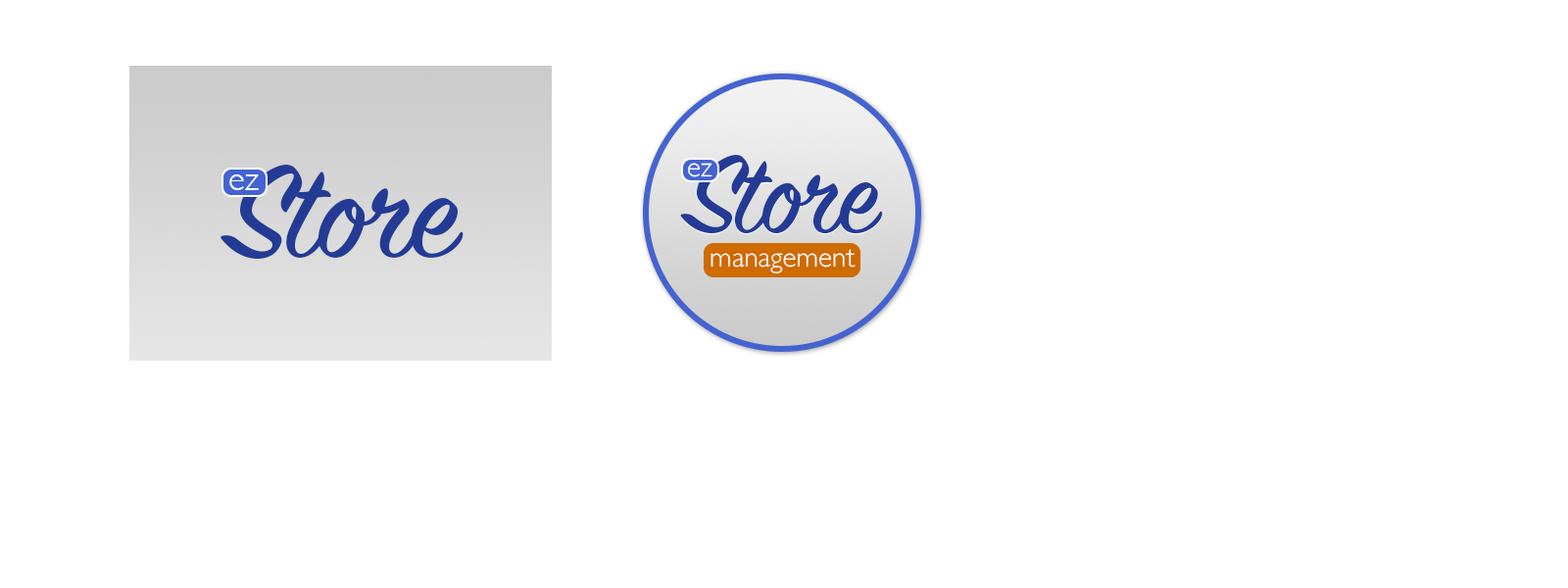
<style>
.page{position:relative;width:1568px;height:588px;background:#ffffff}
.page>*{position:absolute;margin:0}
.t1{font:122.8px "SignPainter-HouseScript";letter-spacing:-0.02em;color:#233b95}
.t2{font:147px "SignPainter-HouseScript";letter-spacing:-0.02em;color:#233b95}
.t3{font:28.8px "GillSans-Light";color:#ffffff}
.t4{font:34.4px "GillSans-Light";color:#ffffff}
</style>
<div class="page">
<p class="t1" style="left:680px;top:156px;width:203px;height:79px">Store</p>
<p class="t1" style="left:680px;top:155px;width:203px;height:79px">Store</p>
<p class="t2" style="left:220px;top:165px;width:244px;height:95px">Store</p>
<p class="t3" style="left:688px;top:163px;width:24px;height:14px">ez</p>
<p class="t4" style="left:229px;top:174px;width:30px;height:16px">ez</p>
<p class="t3" style="left:710px;top:249px;width:146px;height:24px">management</p>
</div>
